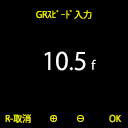
<style>
.page{position:relative;width:128px;height:128px;background:#000000}
.page>*{position:absolute;margin:0}
.t1{font:9px "KozGoPr6N-Regular";color:#ffff00}
.t2{font:23.8px "KozGoPr6N-Regular";color:#ffffff}
.t3{font:12px "KozGoPr6N-Regular";color:#ffffff}
</style>
<div class="page">
<p class="t1" style="left:36px;top:10px;width:56px;height:9px">GRｽﾋﾟｰﾄﾞ入力</p>
<p class="t2" style="left:44px;top:51px;width:42px;height:20px">10.5</p>
<p class="t3" style="left:91px;top:59px;width:5px;height:11px">f</p>
<p class="t1" style="left:5px;top:114px;width:117px;height:9px">R-取消　　⊕　　⊖　 　  OK</p>
</div>
